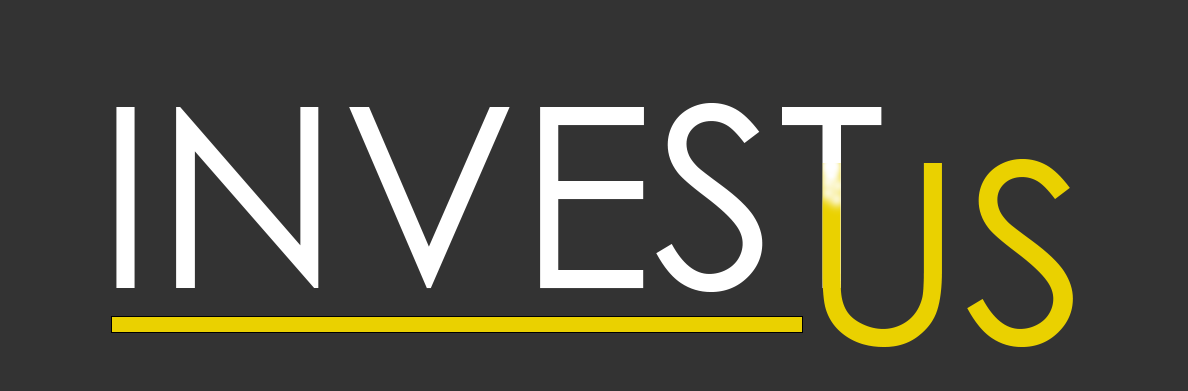
<style>
.page{position:relative;width:1188px;height:391px;background:#333333}
.page>*{position:absolute;margin:0}
.t1{font:251.9px "CenturyGothic";color:#ffffff}
</style>
<div class="page">
<p class="t1" style="left:116px;top:103px;width:766px;height:189px">INVEST</p>
</div>
